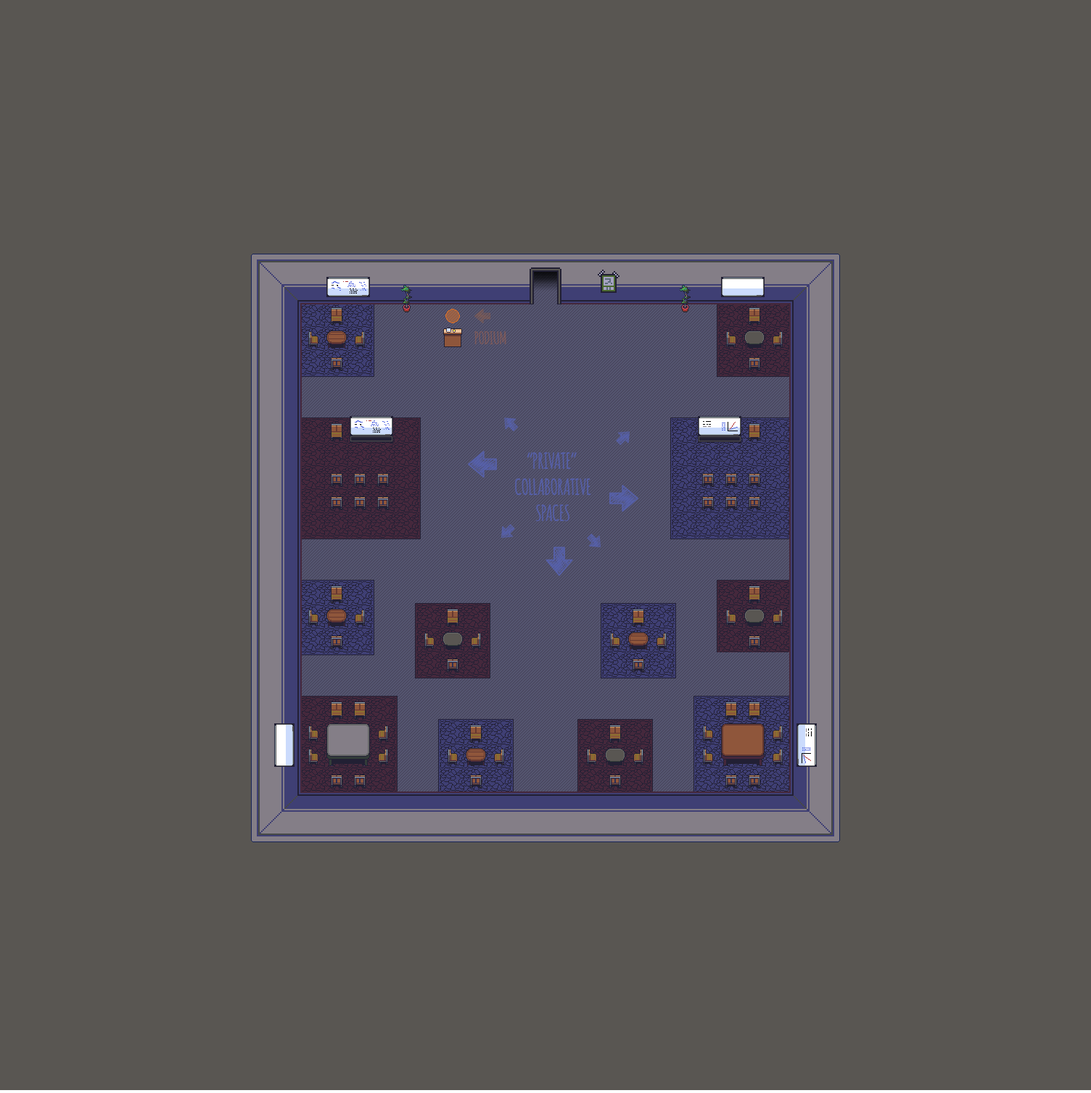
<style>
.page{position:relative;width:1091px;height:1093px;background:#595652}
.page>*{position:absolute;margin:0}
.t1{font:17.4px "Amatic-Bold"}
.t2{font:21.8px "Amatic-Bold";color:#4d57ab}
</style>
<div class="page">
<p class="t1" style="left:474px;top:331px;width:32px;height:13px">PODIUM</p>
<p class="t2" style="left:515px;top:452px;width:76px;height:69px;text-align:center">“PRIVATE” <br>COLLABORATIVE<br>SPACES</p>
</div>
